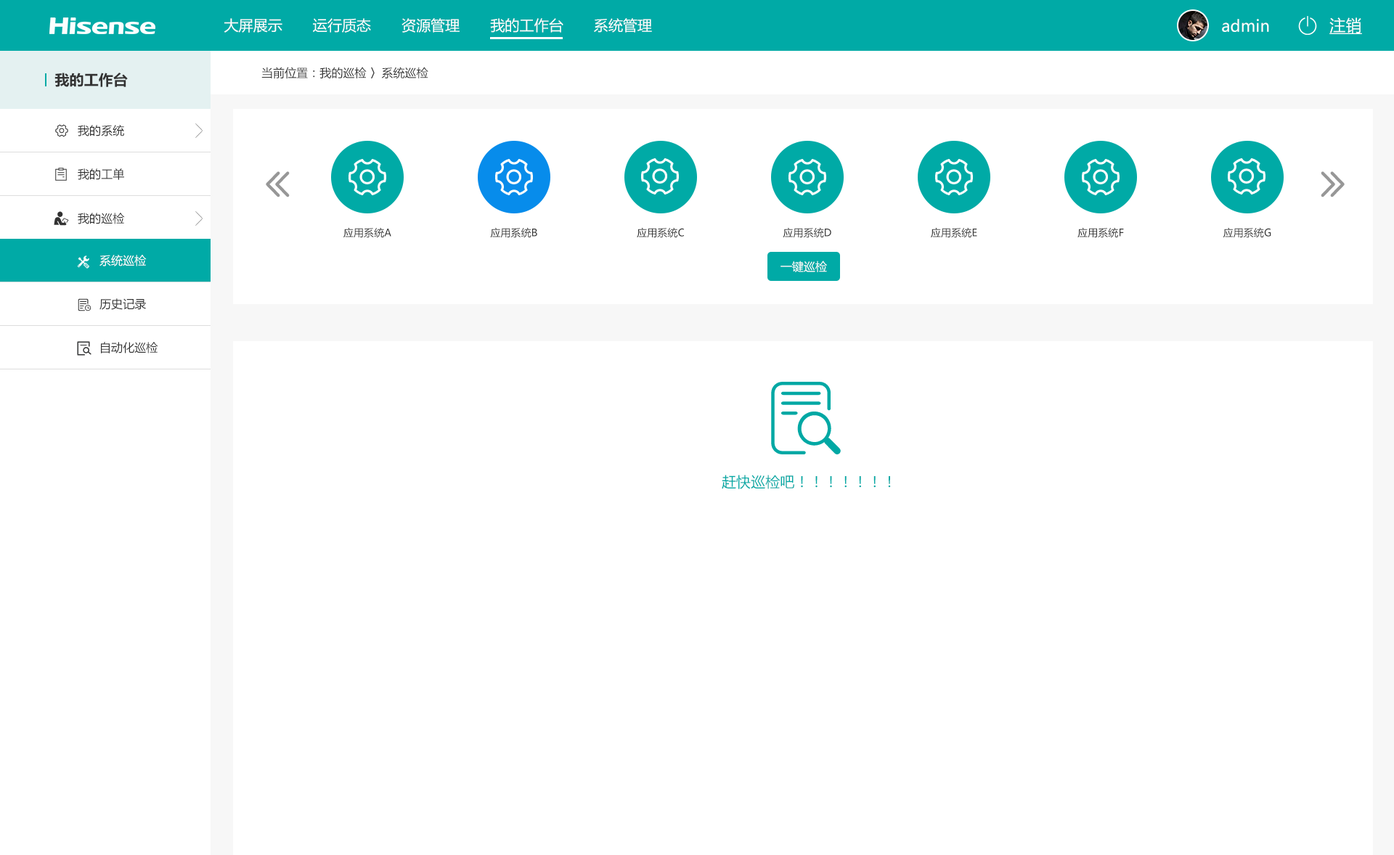
<style>
.page{position:relative;width:1394px;height:855px;background:#ffffff}
.page>*{position:absolute;margin:0}
.t1{font:16px "MicrosoftYaHei";letter-spacing:0.004em;color:#ffffff;text-decoration:underline}
.t2{font:14.5px "MicrosoftYaHei";letter-spacing:0.004em;color:#ffffff}
.t3{font:16px "MicrosoftYaHei";letter-spacing:0.004em;color:#ffffff}
.t4{font:14.5px "MicrosoftYaHei-Bold";letter-spacing:0.004em;color:#333333}
.t5{font:11.6px "MicrosoftYaHei";letter-spacing:0.004em;color:#333333}
.t6{font:10.2px "MicrosoftYaHei";letter-spacing:0.004em;color:#333333}
.t7{font:11.6px "MicrosoftYaHei";letter-spacing:0.004em;color:#ffffff}
.t8{font:14.5px "MicrosoftYaHei";letter-spacing:0.004em;color:#00aaa6}
</style>
<div class="page">
<p class="t1" style="left:1329px;top:17px;width:33px;height:17px">注销</p>
<p class="t2" style="left:224px;top:18px;width:428px;height:15px">大屏展示       运行质态       资源管理       我的工作台       系统管理</p>
<p class="t3" style="left:1222px;top:19px;width:47px;height:13px">admin</p>
<p class="t4" style="left:54px;top:73px;width:74px;height:14px">我的工作台</p>
<p class="t5" style="left:261px;top:67px;width:167px;height:12px">当前位置：我的巡检 〉系统巡检</p>
<p class="t5" style="left:78px;top:125px;width:46px;height:12px">我的系统</p>
<p class="t5" style="left:78px;top:168px;width:46px;height:12px">我的工单</p>
<p class="t5" style="left:78px;top:213px;width:47px;height:11px">我的巡检</p>
<p class="t6" style="left:343px;top:227px;width:48px;height:11px">应用系统A</p>
<p class="t6" style="left:490px;top:227px;width:47px;height:11px">应用系统B</p>
<p class="t6" style="left:637px;top:227px;width:47px;height:11px">应用系统C</p>
<p class="t6" style="left:783px;top:227px;width:48px;height:11px">应用系统D</p>
<p class="t6" style="left:931px;top:227px;width:46px;height:11px">应用系统E</p>
<p class="t6" style="left:1078px;top:227px;width:46px;height:11px">应用系统F</p>
<p class="t6" style="left:1223px;top:227px;width:48px;height:11px">应用系统G</p>
<p class="t7" style="left:99px;top:255px;width:48px;height:11px">系统巡检</p>
<p class="t7" style="left:781px;top:261px;width:46px;height:11px">一键巡检</p>
<p class="t5" style="left:99px;top:298px;width:47px;height:12px">历史记录</p>
<p class="t5" style="left:101px;top:342px;width:57px;height:12px">自动化巡检</p>
<p class="t8" style="left:722px;top:475px;width:169px;height:14px">赶快巡检吧！！！！！！！</p>
</div>
